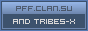
<style>
.page{position:relative;width:88px;height:31px;background:#3d526d}
.page>*{position:absolute;margin:0}
.t1{font:8px "Hooge0553";color:#4d5a6e}
.t2{font:8px "Hooge0553";color:#d8d7d7}
</style>
<div class="page">
<p class="t1" style="left:16px;top:6px;width:56px;height:5px">PFF.CLAN.SU</p>
<p class="t2" style="left:13px;top:19px;width:62px;height:5px">AND TRIBES-X</p>
</div>
